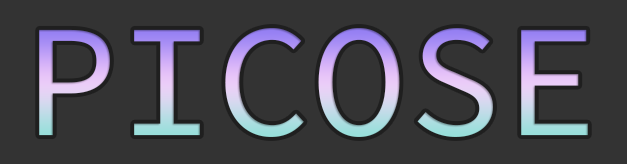
<style>
.page{position:relative;width:627px;height:164px;background:#333333}
.page>*{position:absolute;margin:0}
.t1{font:160px "SourceCodePro-Regular"}
</style>
<div class="page">
<p class="t1" style="left:39px;top:28px;width:549px;height:109px">PICOSE</p>
</div>
